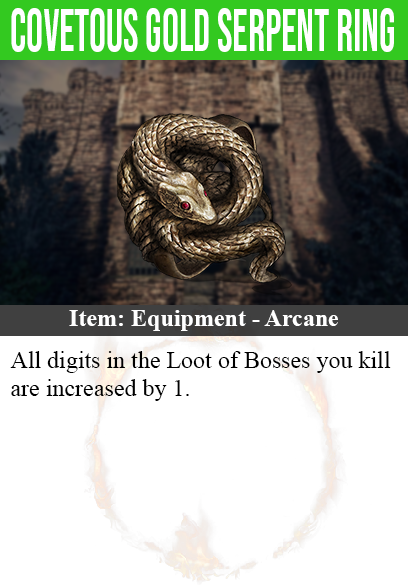
<style>
.page{position:relative;width:408px;height:585px;background:#ffffff}
.page>*{position:absolute;margin:0}
.t1{font:60px "BebasNeue-Regular";color:#ffffff;scale:0.7 1}
.t2{font:24px "TimesNewRomanPS-BoldMT";color:#ffffff}
.t3{font:24px "TimesNewRomanPSMT";color:#000000}
</style>
<div class="page">
<p class="t1" style="left:11px;top:8px;width:383px;height:44px">covetous gold serpent ring</p>
<p class="t2" style="left:69px;top:310px;width:269px;height:21px">Item: Equipment - Arcane</p>
<p class="t3" style="left:10px;top:351px;width:381px;height:50px">All digits in the Loot of Bosses you kill<br>are increased by 1.</p>
</div>
